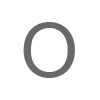
<style>
.page{position:relative;width:100px;height:100px;background:#ffffff}
.page>*{position:absolute;margin:0}
.t1{font:75px "ArialMT";color:#696966}
</style>
<div class="page">
<p class="t1" style="left:23px;top:22px;width:52px;height:56px">O</p>
</div>
